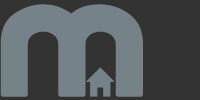
<style>
.page{position:relative;width:200px;height:100px;background:#333333}
.page>*{position:absolute;margin:0}
.t1{font:231.9px "Gordon-Regular";color:#758388;font-weight:bold}
</style>
<div class="page">
<p class="t1" style="left:0px;top:4px;width:143px;height:93px">m</p>
</div>
